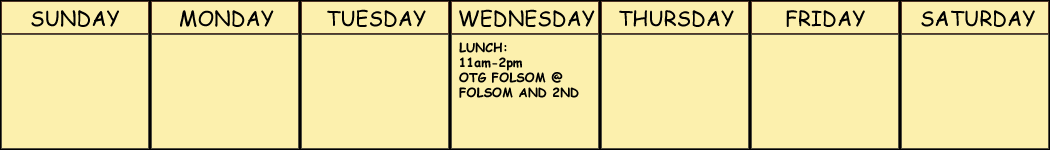
<style>
.page{position:relative;width:1050px;height:150px;background:#fcf0ad}
.page>*{position:absolute;margin:0}
.t1{font:20.8px "ComicSansMS";color:#000000}
.t2{font:12.5px "ComicSansMS-Bold";color:#000000}
</style>
<div class="page">
<p class="t1" style="left:31px;top:10px;width:88px;height:17px">SUNDAY</p>
<p class="t1" style="left:180px;top:10px;width:94px;height:17px">MONDAY</p>
<p class="t1" style="left:327px;top:9px;width:99px;height:18px">TUESDAY</p>
<p class="t1" style="left:459px;top:9px;width:136px;height:18px">WEDNESDAY</p>
<p class="t1" style="left:619px;top:10px;width:115px;height:17px">THURSDAY</p>
<p class="t1" style="left:786px;top:10px;width:79px;height:17px">FRIDAY</p>
<p class="t1" style="left:921px;top:10px;width:114px;height:17px">SATURDAY</p>
<p class="t2" style="left:459px;top:42px;width:120px;height:56px">LUNCH: <br>11am-2pm<br>OTG FOLSOM @ <br>FOLSOM AND 2ND</p>
</div>
